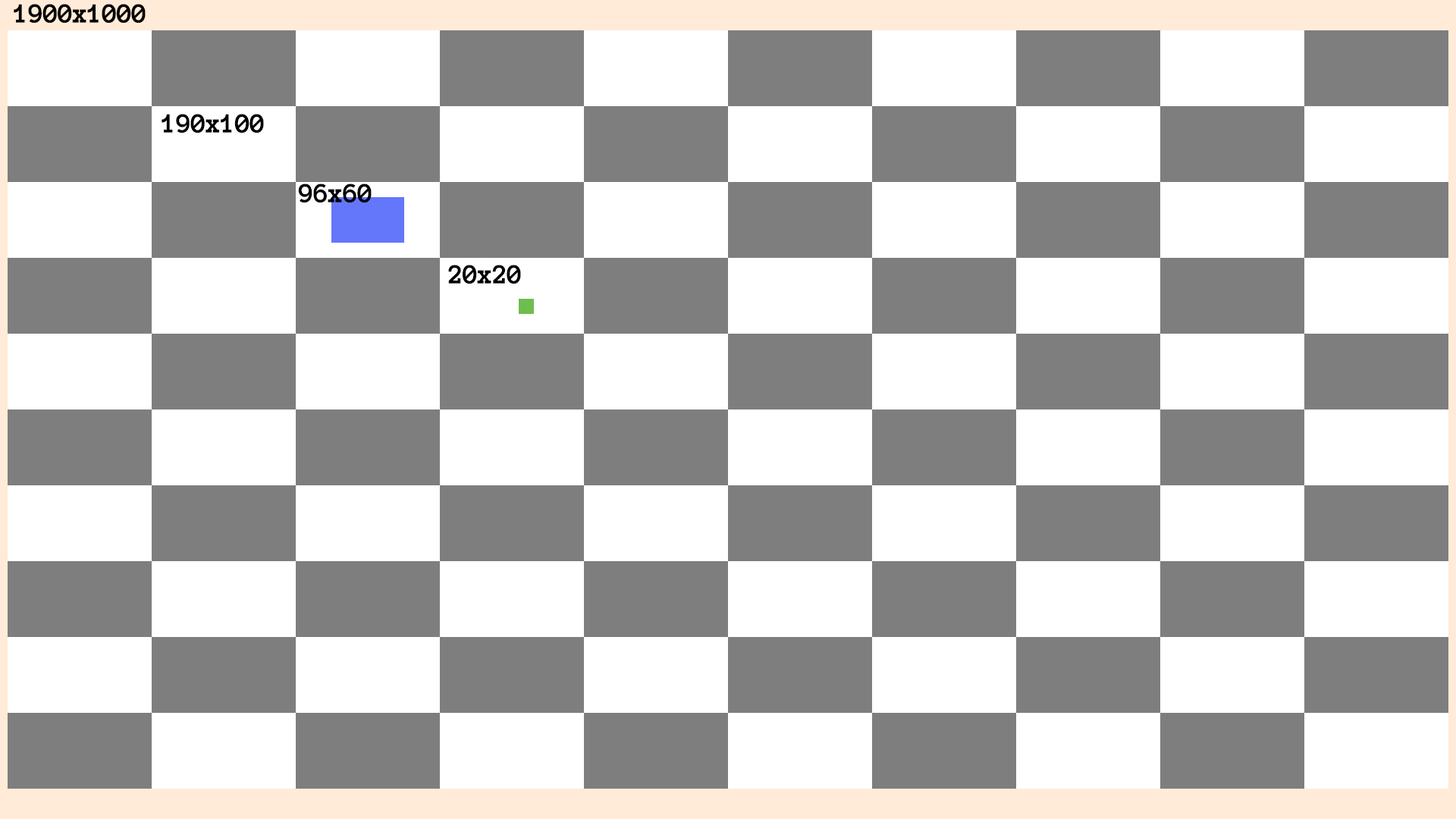
<style>
.page{position:relative;width:1456px;height:819px;background:#ffffff}
.page>*{position:absolute;margin:0}
.t1{font:28.1px "AnonymousPro-Bold";letter-spacing:-0.02em;color:#000000}
</style>
<div class="page">
<p class="t1" style="left:14px;top:4px;width:132px;height:19px">1900x1000</p>
<p class="t1" style="left:162px;top:114px;width:102px;height:19px">190x100</p>
<p class="t1" style="left:298px;top:184px;width:74px;height:18px">96x60</p>
<p class="t1" style="left:448px;top:265px;width:73px;height:19px">20x20</p>
</div>
